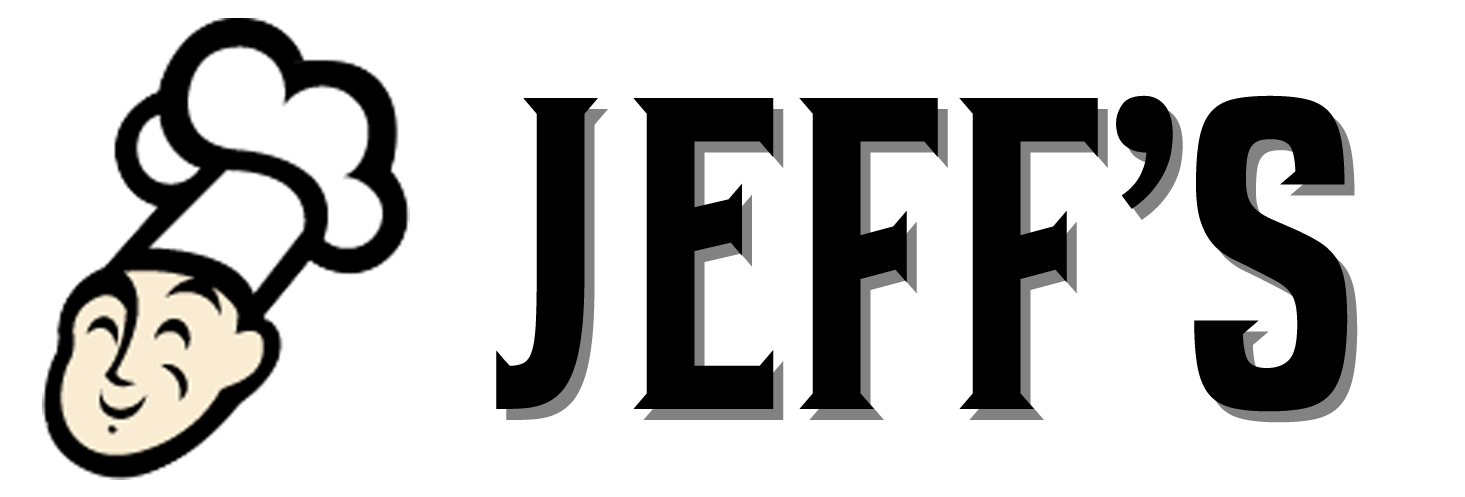
<style>
.page{position:relative;width:1465px;height:497px;background:#ffffff}
.page>*{position:absolute;margin:0}
.t1{font:444.4px "BartenderW01-Regular";letter-spacing:-0.03em;color:#000000}
</style>
<div class="page">
<p class="t1" style="left:496px;top:95px;width:852px;height:317px">JEFF’S</p>
<p class="t1" style="left:506px;top:106px;width:852px;height:317px;opacity:0.49">JEFF’S</p>
</div>
